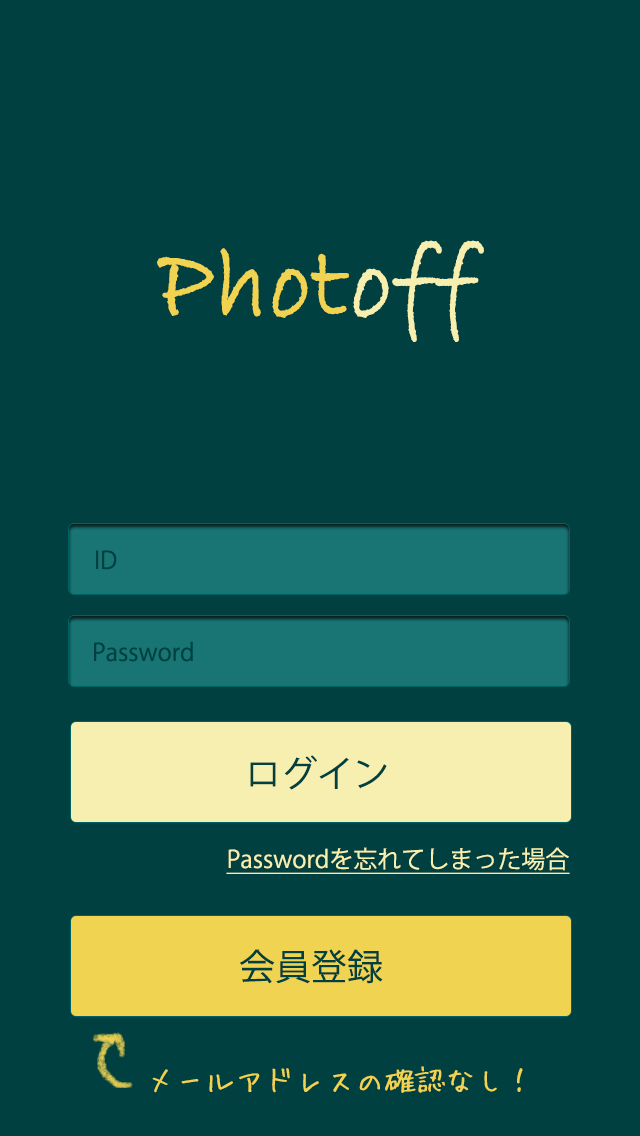
<style>
.page{position:relative;width:640px;height:1136px;background:#004040}
.page>*{position:absolute;margin:0}
.t1{font:100px "BradleyHandITC";color:#f0d351;font-weight:bold}
.t2{font:100px "BradleyHandITC";color:#f7efb0;font-weight:bold}
.t3{font:24px "KozGoPr6N-Regular";color:#004040}
.t4{font:36px "KozGoPr6N-Regular";color:#004040}
.t5{font:24px "KozGoPr6N-Regular";color:#f7efb0;text-decoration:underline}
.t6{font:30px "HuiFont";color:#f0d351}
</style>
<div class="page">
<p class="t1" style="left:157px;top:240px;width:327px;height:102px">Phot<span class="t2">off</span></p>
<p class="t3" style="left:96px;top:550px;width:21px;height:20px">ID</p>
<p class="t3" style="left:94px;top:641px;width:99px;height:21px">Password</p>
<p class="t4" style="left:250px;top:755px;width:137px;height:35px">ログイン</p>
<p class="t5" style="left:226px;top:847px;width:344px;height:27px">Passwordを忘れてしまった場合</p>
<p class="t4" style="left:240px;top:949px;width:143px;height:35px">会員登録</p>
<p class="t6" style="left:152px;top:1066px;width:371px;height:27px">メールアドレスの確認なし！</p>
</div>
